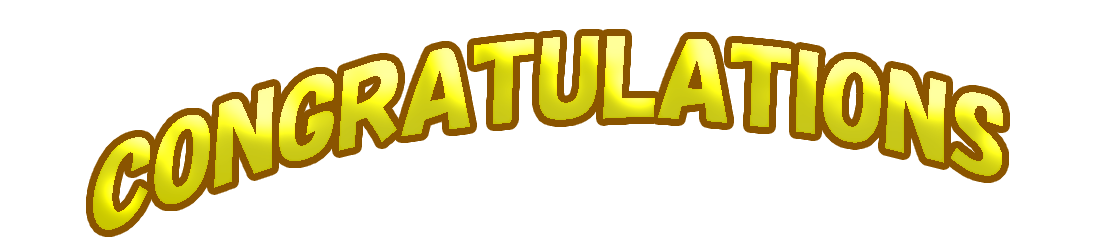
<style>
.page{position:relative;width:1100px;height:250px;background:#ffffff}
.page>*{position:absolute;margin:0}
.t1{font:100px "HGPSoeiKakupoptai"}
</style>
<div class="page">
<p class="t1" style="left:93px;top:36px;width:910px;height:194px">CONGRATULATIONS</p>
</div>
